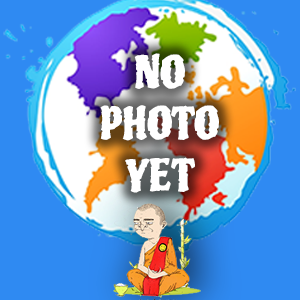
<style>
.page{position:relative;width:300px;height:300px;background:#2f8af2}
.page>*{position:absolute;margin:0}
.t1{font:43px "Piedra-Regular";color:#ffffff}
</style>
<div class="page">
<p class="t1" style="left:100px;top:53px;width:119px;height:140px;text-align:center">NO<br>PHOTO<br>YET</p>
</div>
